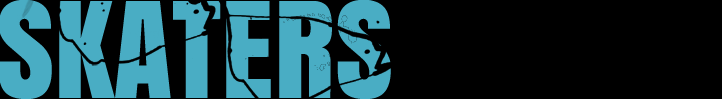
<style>
.page{position:relative;width:722px;height:99px;background:#000000}
.page>*{position:absolute;margin:0}
.t1{font:125px "Anton";color:#49adc4}
</style>
<div class="page">
<p class="t1" style="left:0px;top:0px;width:391px;height:99px">SKATERS</p>
</div>
